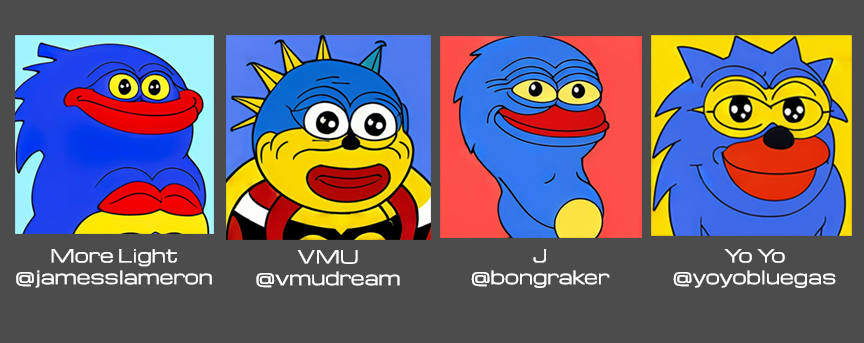
<style>
.page{position:relative;width:864px;height:343px;background:#4c4c4c}
.page>*{position:absolute;margin:0}
.t1{font:18px "Michroma";color:#ffffff}
.t2{font:18px/60px "Michroma";color:#ffffff}
</style>
<div class="page">
<p class="t1" style="left:16px;top:249px;width:196px;height:39px;text-align:center"><span class="t2">More Light</span><br>@jamesslameron</p>
<p class="t1" style="left:256px;top:250px;width:144px;height:38px;text-align:center">VMU<br>@vmudream<br><span class="t2">@<br>@</span></p>
<p class="t1" style="left:471px;top:249px;width:139px;height:39px;text-align:center">J<br>@bongraker</p>
<p class="t1" style="left:673px;top:249px;width:163px;height:39px;text-align:center">Yo Yo<br>@yoyobluegas</p>
</div>
